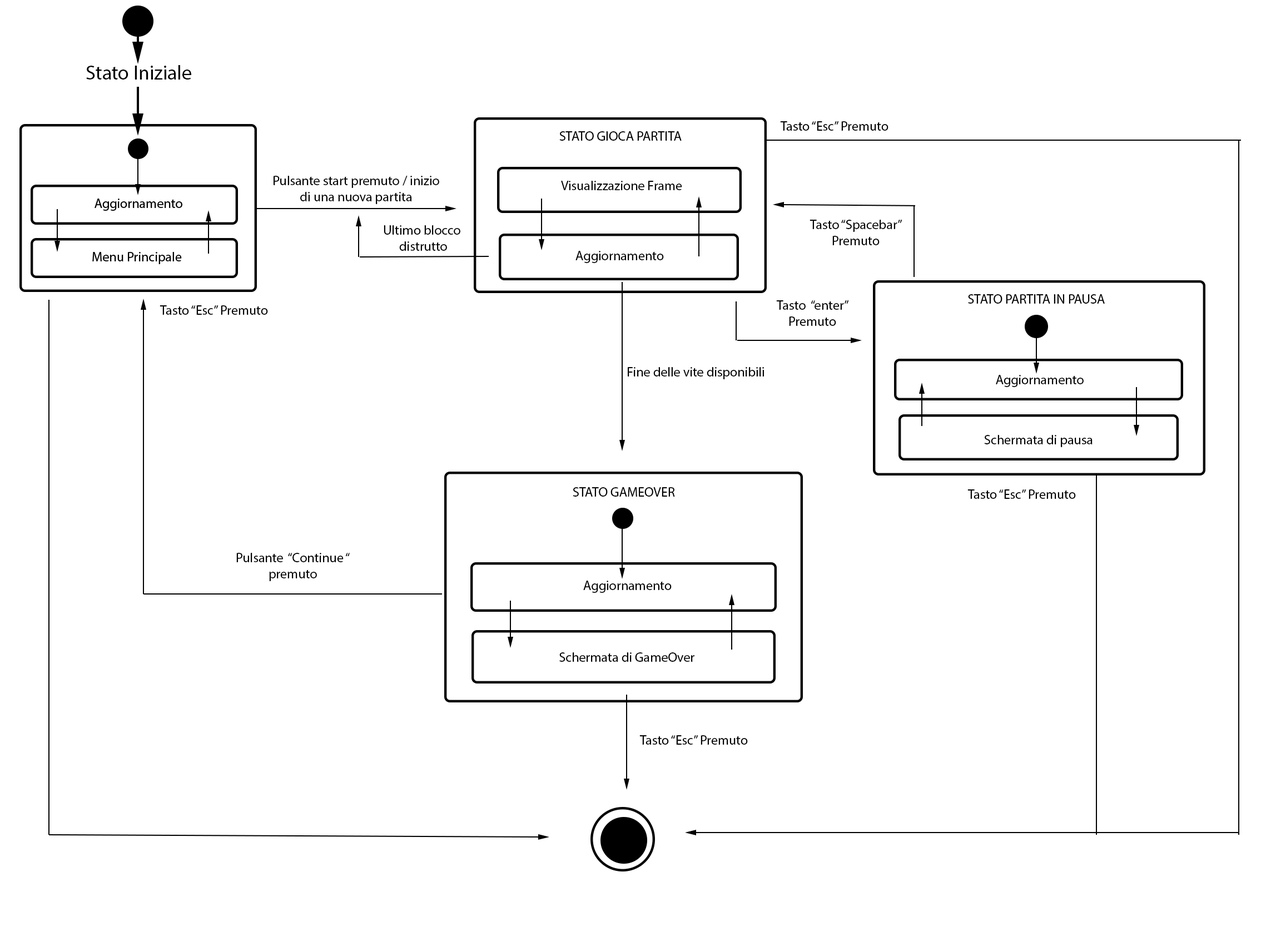
<style>
.page{position:relative;width:1261px;height:946px;background:#ffffff}
.page>*{position:absolute;margin:0}
.t1{font:20px "MyriadPro-Regular";color:#000000}
.t2{font:13.3px "MyriadPro-Regular";color:#000000}
</style>
<div class="page">
<p class="t1" style="left:86px;top:65px;width:105px;height:15px">Stato Iniziale</p>
<p class="t2" style="left:780px;top:121px;width:108px;height:10px">Tasto “Esc” Premuto</p>
<p class="t2" style="left:559px;top:131px;width:123px;height:10px">STATO GIOCA PARTITA</p>
<p class="t2" style="left:274px;top:176px;width:165px;height:28px;text-align:center">Pulsante start premuto / inizio di una nuova partita</p>
<p class="t2" style="left:561px;top:181px;width:121px;height:9px">Visualizzazione Frame</p>
<p class="t2" style="left:809px;top:220px;width:93px;height:25px;text-align:center">Tasto “Spacebar” Premuto</p>
<p class="t2" style="left:384px;top:225px;width:76px;height:26px;text-align:center">Ultimo blocco <br>distrutto</p>
<p class="t2" style="left:575px;top:251px;width:89px;height:12px">Aggiornamento</p>
<p class="t2" style="left:160px;top:305px;width:108px;height:10px">Tasto “Esc” Premuto</p>
<p class="t2" style="left:776px;top:300px;width:73px;height:26px;text-align:center">Tasto  “enter” Premuto</p>
<p class="t2" style="left:968px;top:294px;width:137px;height:10px">STATO PARTITA IN PAUSA</p>
<p class="t2" style="left:628px;top:367px;width:136px;height:12px">Fine delle vite disponibili</p>
<p class="t2" style="left:996px;top:375px;width:88px;height:12px">Aggiornamento</p>
<p class="t2" style="left:984px;top:435px;width:108px;height:12px">Schermata di pausa</p>
<p class="t2" style="left:573px;top:487px;width:102px;height:9px">STATO GAMEOVER</p>
<p class="t2" style="left:967px;top:489px;width:109px;height:10px">Tasto “Esc” Premuto</p>
<p class="t2" style="left:236px;top:553px;width:114px;height:28px;text-align:center">Pulsante  “Continue “<br>premuto</p>
<p class="t2" style="left:583px;top:580px;width:89px;height:13px">Aggiornamento</p>
<p class="t2" style="left:559px;top:652px;width:135px;height:10px">Schermata di GameOver</p>
<p class="t2" style="left:639px;top:735px;width:109px;height:9px">Tasto “Esc” Premuto</p>
</div>
